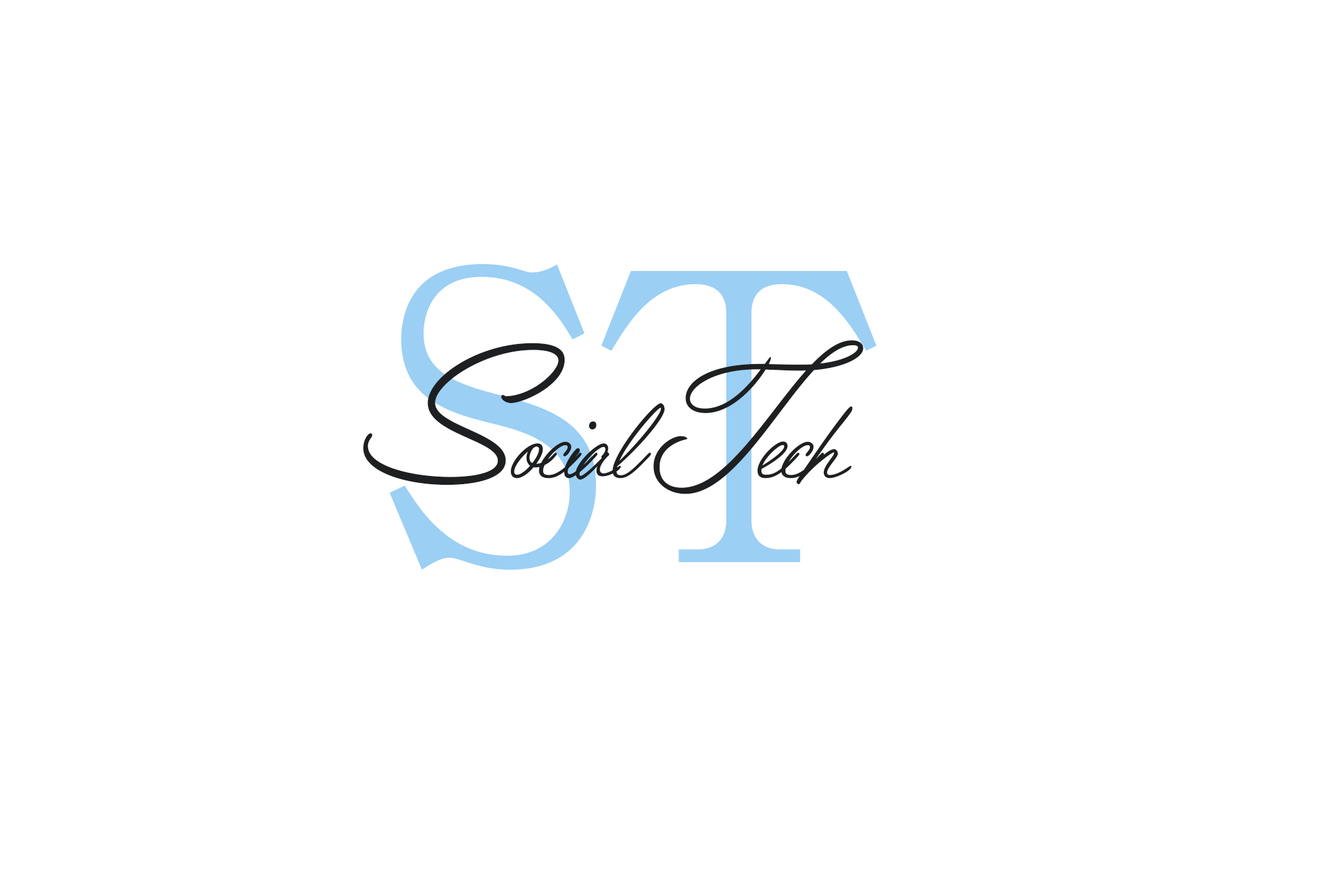
<style>
.page{position:relative;width:1338px;height:891px;background:#ffffff}
.page>*{position:absolute;margin:0}
.t1{font:398.9px "RyuminPr6N-Light";letter-spacing:-0.05em;color:#9bcff4}
.t2{font:125.8px "FilmotypeLaCrosse";letter-spacing:-0.05em;color:#1d1f20}
.t3{font:188.7px "FilmotypeLaCrosse";letter-spacing:-0.05em;color:#1d1f20}
</style>
<div class="page">
<p class="t1" style="left:389px;top:264px;width:487px;height:306px">ST</p>
<p class="t2" style="left:363px;top:340px;width:500px;height:155px"><span class="t3">S</span>ocial <span class="t3">T</span>ech</p>
</div>
